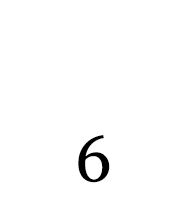
<style>
.page{position:relative;width:188px;height:202px;background:#ffffff}
.page>*{position:absolute;margin:0}
.t1{font:64.7px "Georgia";color:#000000}
</style>
<div class="page">
<p class="t1" style="left:78px;top:135px;width:32px;height:48px">6</p>
</div>
